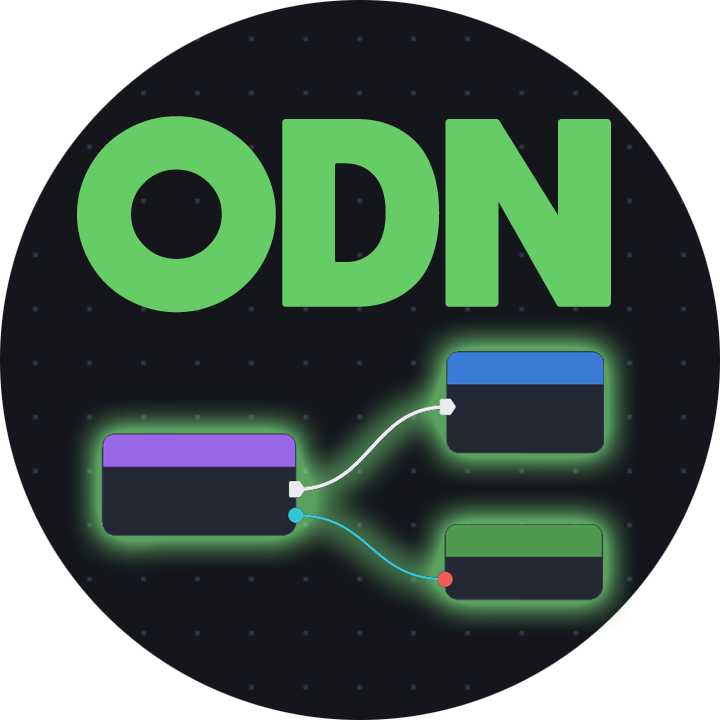
<style>
.page{position:relative;width:720px;height:720px;background:#14161c}
.page>*{position:absolute;margin:0}
.t1{font:187.5px "moon_get-Heavy";letter-spacing:0.005em;color:#66cc66}
</style>
<div class="page">
<p class="t1" style="left:77px;top:116px;width:534px;height:197px">ODN</p>
</div>
